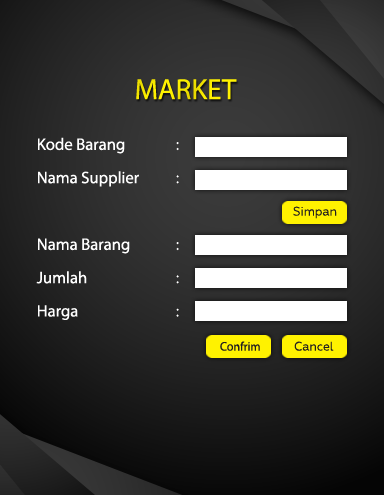
<style>
.page{position:relative;width:384px;height:495px}
.page>*{position:absolute;margin:0}
.t1{font:29.2px "MyriadPro-Regular";color:#fbee00}
.t2{font:16.7px/33.3px "MyriadPro-Regular";color:#ffffff}
.t3{font:12.5px "Geometria";color:#231f20;scale:0.96 1}
.t4{font:12.5px "MyriadPro-Regular";color:#231f20;scale:0.96 1}
</style>
<div class="page">
<p class="t1" style="left:136px;top:79px;width:101px;height:21px">MARKET</p>
<p class="t2" style="left:36px;top:137px;width:103px;height:183px">Kode Barang<br>Nama Supplier<br><br>Nama Barang<br>Jumlah<br>Harga</p>
<p class="t2" style="left:176px;top:142px;width:3px;height:175px">:<br>:<br><br>:<br>:<br>:</p>
<p class="t3" style="left:293px;top:206px;width:44px;height:13px">Simpan</p>
<p class="t4" style="left:220px;top:341px;width:40px;height:10px">Confrim</p>
<p class="t3" style="left:294px;top:341px;width:40px;height:10px">Cancel</p>
</div>
